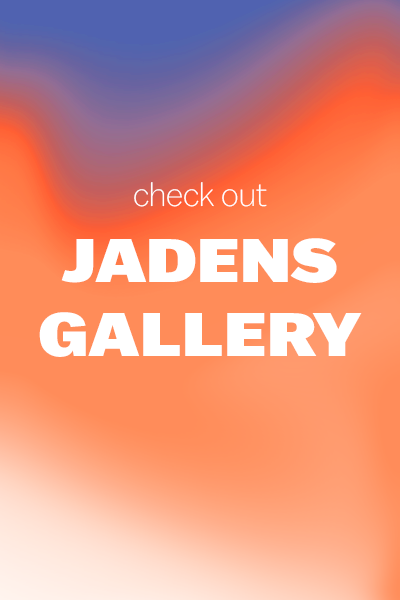
<style>
.page{position:relative;width:400px;height:600px}
.page>*{position:absolute;margin:0}
.t1{font:33.8px "Balto-Light";color:#ffffff}
.t2{font:61.3px "Balto-Black";color:#ffffff;scale:1.15 1}
</style>
<div class="page">
<p class="t1" style="left:134px;top:182px;width:133px;height:25px">check out</p>
<p class="t2" style="left:39px;top:238px;width:323px;height:119px;text-align:center">JADENS<br>GALLERY</p>
</div>
